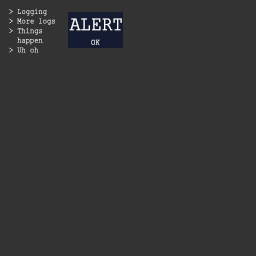
<style>
.page{position:relative;width:256px;height:256px;background:#333333}
.page>*{position:absolute;margin:0}
.t1{font:8px "CourierNewPSMT";color:#ffffff;font-weight:bold;scale:0.85 1}
.t2{font:20px "CourierNewPSMT";color:#ffffff;font-weight:bold;scale:0.85 1}
.t3{font:8px "CourierNewPSMT";font-weight:bold;scale:0.85 1}
</style>
<div class="page">
<p class="t1" style="left:9px;top:8px;width:46px;height:45px">&gt; Logging<br>&gt; More logs<br>&gt; Things<br>  happen<br>&gt; Uh oh</p>
<p class="t2" style="left:69px;top:18px;width:53px;height:13px">ALERT</p>
<p class="t3" style="left:91px;top:39px;width:9px;height:6px">OK</p>
</div>
